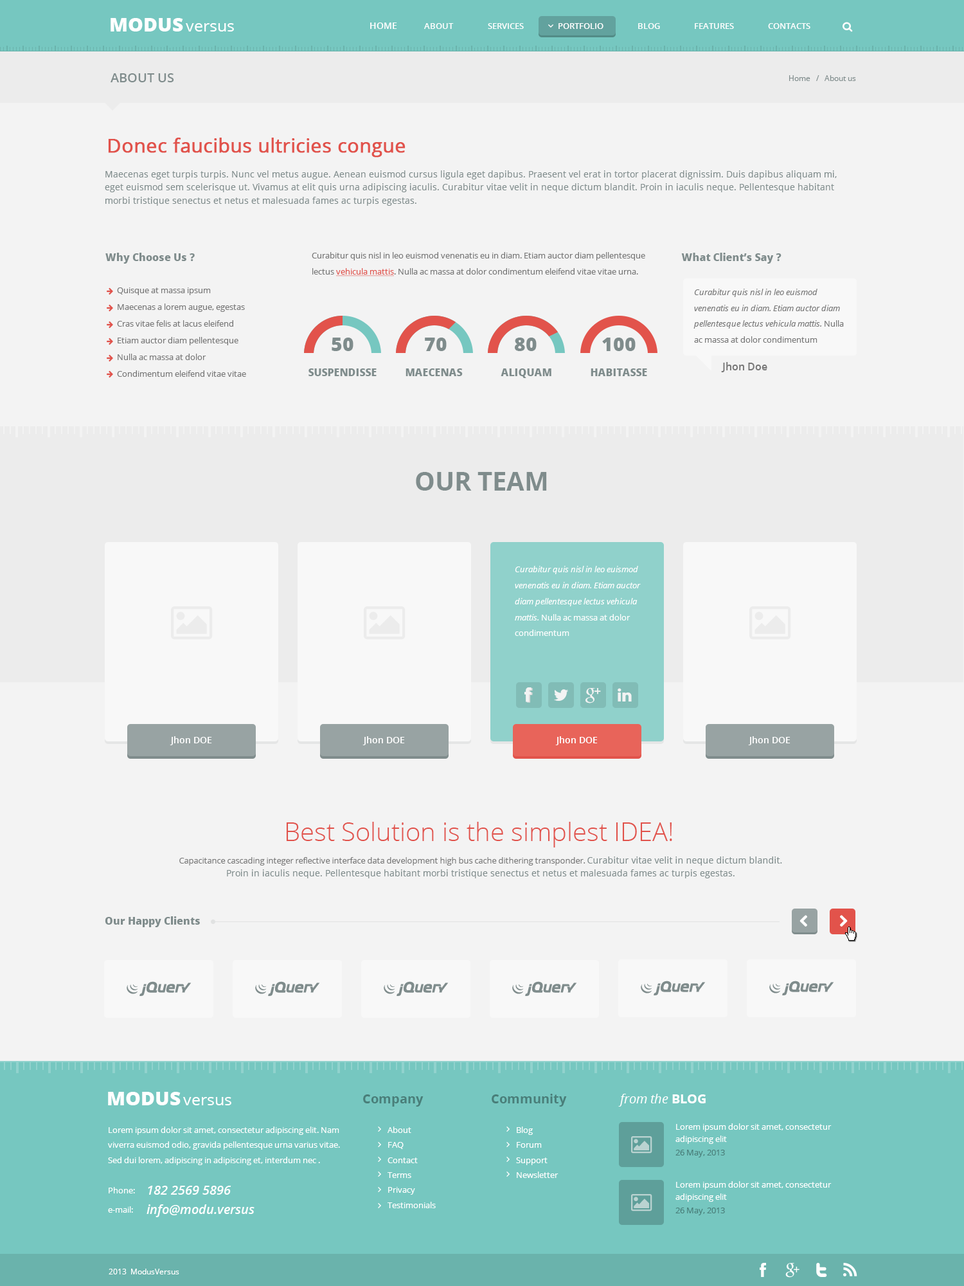
<style>
.page{position:relative;width:964px;height:1286px;background:#f3f3f3}
.page>*{position:absolute;margin:0}
.t1{font:19.3px "OpenSans-Extrabold";color:#ffffff}
.t2{font:16.1px "OpenSans";color:#ffffff}
.t3{font:9px "OpenSans-Semibold";color:#ffffff}
.t4{font:8.4px "OpenSans-Semibold";color:#ffffff}
.t5{font:12.9px "OpenSans-Semibold";color:#7f8c8c}
.t6{font:7.7px "OpenSans";color:#7f8c8c}
.t7{font:19.3px "OpenSans";color:#e1524b;font-weight:bold}
.t8{font:9px/13.4px "OpenSans";color:#7f8c8c}
.t9{font:10.3px "OpenSans-Extrabold";color:#7f8c8c}
.t10{font:8.4px/15.9px "OpenSans";color:#777777}
.t11{font:8.4px/15.9px "OpenSans";color:#e1524b;text-decoration:underline}
.t12{font:8.4px/16.7px "OpenSans";color:#777777}
.t13{font:8.4px/15.9px "OpenSans-Italic";color:#777777}
.t14{font:19.3px "OpenSans-Extrabold";color:#7f8c8c}
.t15{font:10.3px "OpenSans-Semibold";color:#777777}
.t16{font:25.7px "OpenSans-Bold";color:#7f8c8c}
.t17{font:8.4px/15.9px "OpenSans-Italic";color:#ffffff}
.t18{font:8.4px/15.9px "OpenSans";color:#ffffff}
.t19{font:25.7px "OpenSans-Light";color:#e1524b}
.t20{font:8.4px/13.4px "OpenSans";color:#777777}
.t21{font:12.9px "OpenSans-Bold";color:#497e79}
.t22{font:12.9px "OpenSans-Italic";color:#ffffff}
.t23{font:12.9px "OpenSans-Bold";color:#ffffff}
.t24{font:8.4px/15px "OpenSans";color:#ffffff}
.t25{font:8.4px/12.5px "OpenSans";color:#ffffff}
.t26{font:8.4px "OpenSans";color:#497e79}
.t27{font:8.4px "OpenSans";color:#ffffff}
.t28{font:12.9px "OpenSans-SemiboldItalic";color:#ffffff}
.t29{font:7.7px "OpenSans";color:#ffffff}
</style>
<div class="page">
<p class="t1" style="left:111px;top:18px;width:72px;height:14px">MODUS</p>
<p class="t2" style="left:186px;top:23px;width:48px;height:9px">versus</p>
<p class="t3" style="left:370px;top:22px;width:27px;height:7px">HOME</p>
<p class="t4" style="left:424px;top:23px;width:30px;height:6px">ABOUT</p>
<p class="t4" style="left:488px;top:23px;width:36px;height:6px">SERVICES</p>
<p class="t4" style="left:559px;top:23px;width:45px;height:6px">PORTFOLIO</p>
<p class="t4" style="left:638px;top:23px;width:22px;height:6px">BLOG</p>
<p class="t4" style="left:695px;top:23px;width:39px;height:6px">FEATURES</p>
<p class="t4" style="left:768px;top:23px;width:43px;height:6px">CONTACTS</p>
<p class="t5" style="left:111px;top:73px;width:63px;height:9px">ABOUT US</p>
<p class="t6" style="left:789px;top:75px;width:67px;height:6px">Home   /   About us</p>
<p class="t7" style="left:108px;top:138px;width:298px;height:20px">Donec faucibus ultricies congue</p>
<p class="t8" style="left:105px;top:170px;width:732px;height:36px">Maecenas eget turpis turpis. Nunc vel metus augue. Aenean euismod cursus ligula eget dapibus. Praesent vel erat in tortor placerat dignissim. Duis dapibus aliquam mi, eget euismod sem scelerisque ut. Vivamus at elit quis urna adipiscing iaculis. Curabitur vitae velit in neque dictum blandit. Proin in iaculis neque. Pellentesque habitant morbi tristique senectus et netus et malesuada fames ac turpis egestas.</p>
<p class="t9" style="left:105px;top:253px;width:90px;height:11px">Why Choose Us ?</p>
<p class="t10" style="left:312px;top:252px;width:333px;height:24px">Curabitur quis nisl in leo euismod venenatis eu in diam. Etiam auctor diam pellentesque lectus <span class="t11">vehicula mattis</span>. Nulla ac massa at dolor condimentum eleifend vitae vitae urna.</p>
<p class="t9" style="left:681px;top:253px;width:101px;height:11px">What Client’s Say ?</p>
<p class="t12" style="left:117px;top:287px;width:129px;height:90px">Quisque at massa ipsum <br>Maecenas a lorem augue, egestas <br>Cras vitae felis at lacus eleifend <br>Etiam auctor diam pellentesque <br>Nulla ac massa at dolor <br>Condimentum eleifend vitae vitae</p>
<p class="t13" style="left:694px;top:289px;width:150px;height:54px">Curabitur quis nisl in leo euismod venenatis eu in diam. Etiam auctor diam pellentesque lectus vehicula mattis. <span class="t10">Nulla ac massa at dolor condimentum</span></p>
<p class="t14" style="left:332px;top:338px;width:22px;height:13px">50</p>
<p class="t14" style="left:425px;top:338px;width:22px;height:13px">70</p>
<p class="t14" style="left:515px;top:338px;width:22px;height:13px">80</p>
<p class="t14" style="left:602px;top:338px;width:34px;height:13px">100</p>
<p class="t15" style="left:721px;top:362px;width:47px;height:10px">Jhon Doe</p>
<p class="t9" style="left:309px;top:368px;width:68px;height:8px">SUSPENDISSE</p>
<p class="t9" style="left:406px;top:368px;width:57px;height:8px">MAECENAS</p>
<p class="t9" style="left:501px;top:368px;width:51px;height:10px">ALIQUAM</p>
<p class="t9" style="left:591px;top:368px;width:56px;height:8px">HABITASSE</p>
<p class="t16" style="left:416px;top:472px;width:131px;height:19px">OUR TEAM</p>
<p class="t17" style="left:515px;top:566px;width:126px;height:70px">Curabitur quis nisl in leo euismod venenatis eu in diam. Etiam auctor diam pellentesque lectus vehicula mattis. <span class="t18">Nulla ac massa at dolor condimentum</span></p>
<p class="t3" style="left:170px;top:736px;width:42px;height:9px">Jhon DOE</p>
<p class="t3" style="left:363px;top:736px;width:42px;height:9px">Jhon DOE</p>
<p class="t3" style="left:555px;top:736px;width:43px;height:9px">Jhon DOE</p>
<p class="t3" style="left:748px;top:736px;width:43px;height:9px">Jhon DOE</p>
<p class="t19" style="left:286px;top:822px;width:386px;height:25px">Best Solution is the simplest IDEA!</p>
<p class="t8" style="left:179px;top:856px;width:603px;height:22px;text-align:center"><span class="t20">Capacitance cascading integer reflective interface data development high bus cache dithering transponder. </span>Curabitur vitae velit in neque dictum blandit. Proin in iaculis neque. Pellentesque habitant morbi tristique senectus et netus et malesuada fames ac turpis egestas.</p>
<p class="t9" style="left:105px;top:916px;width:95px;height:11px">Our Happy Clients</p>
<p class="t1" style="left:108px;top:1092px;width:73px;height:13px">MODUS</p>
<p class="t2" style="left:183px;top:1097px;width:48px;height:8px">versus</p>
<p class="t21" style="left:363px;top:1094px;width:61px;height:12px">Company</p>
<p class="t21" style="left:492px;top:1094px;width:75px;height:12px">Community</p>
<p class="t22" style="left:618px;top:1094px;width:88px;height:12px">from the <span class="t23">BLOG</span></p>
<p class="t24" style="left:108px;top:1126px;width:232px;height:39px">Lorem ipsum dolor sit amet, consectetur adipiscing elit. Nam viverra euismod odio, gravida pellentesque urna varius vitae. Sed dui lorem, adipiscing in adipiscing et, interdum nec .</p>
<p class="t24" style="left:388px;top:1126px;width:48px;height:82px">About<br>FAQ<br>Contact<br>Terms<br>Privacy<br>Testimonials</p>
<p class="t24" style="left:516px;top:1126px;width:43px;height:52px">Blog<br>Forum<br>Support<br>Newsletter</p>
<p class="t25" style="left:676px;top:1123px;width:156px;height:21px">Lorem ipsum dolor sit amet, consectetur adipiscing elit</p>
<p class="t26" style="left:676px;top:1149px;width:49px;height:8px">26 May, 2013</p>
<p class="t25" style="left:676px;top:1181px;width:156px;height:21px">Lorem ipsum dolor sit amet, consectetur adipiscing elit</p>
<p class="t27" style="left:109px;top:1187px;width:26px;height:6px">Phone:</p>
<p class="t28" style="left:148px;top:1185px;width:83px;height:9px">182 2569 5896</p>
<p class="t27" style="left:108px;top:1206px;width:25px;height:6px">e-mail:</p>
<p class="t28" style="left:147px;top:1204px;width:108px;height:13px">info@modu.versus</p>
<p class="t26" style="left:676px;top:1207px;width:49px;height:8px">26 May, 2013</p>
<p class="t29" style="left:109px;top:1268px;width:70px;height:6px">2013  ModusVersus</p>
</div>
